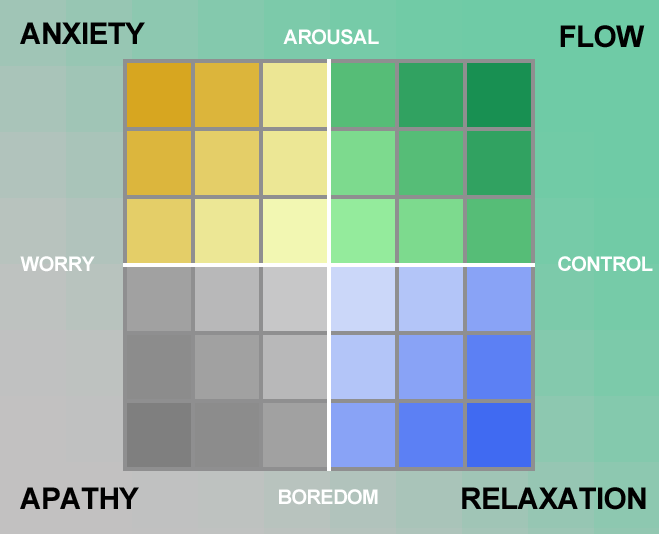
<style>
.page{position:relative;width:659px;height:534px}
.page>*{position:absolute;margin:0}
.t1{font:29.9px "Arial-BoldMT";letter-spacing:-0.025em;color:#000000;text-transform:uppercase}
.t2{font:19.9px "Arial-BoldMT";letter-spacing:-0.025em;color:#ffffff;text-transform:uppercase}
</style>
<div class="page">
<p class="t1" style="left:20px;top:22px;width:125px;height:22px">Anxiety</p>
<p class="t2" style="left:283px;top:29px;width:96px;height:16px">Arousal</p>
<p class="t1" style="left:560px;top:25px;width:85px;height:23px">Flow</p>
<p class="t2" style="left:20px;top:256px;width:75px;height:16px">WORRY</p>
<p class="t2" style="left:558px;top:256px;width:95px;height:16px">Control</p>
<p class="t1" style="left:20px;top:487px;width:119px;height:22px">APATHY</p>
<p class="t2" style="left:279px;top:489px;width:99px;height:16px">BOREDOM</p>
<p class="t1" style="left:462px;top:487px;width:184px;height:23px">RELAXATION</p>
</div>
